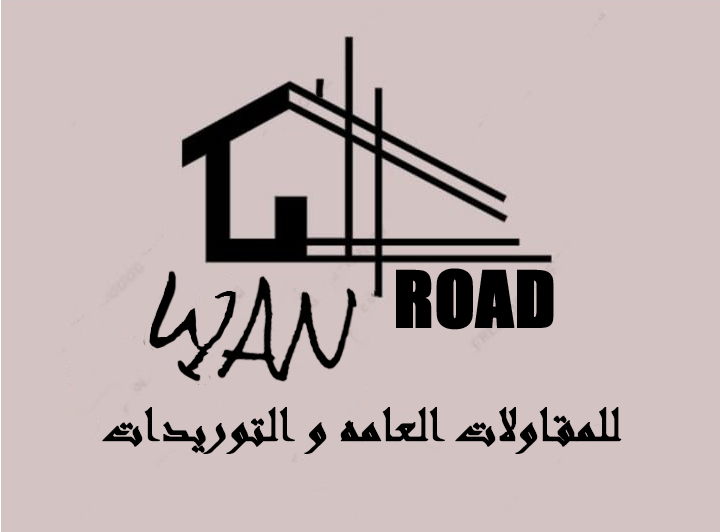
<style>
.page{position:relative;width:720px;height:532px;background:#d3c3c3}
.page>*{position:absolute;margin:0}
.t1{font:54.9px "Andalus";color:#000000;font-weight:bold}
</style>
<div class="page">
<p class="t1" style="left:102px;top:407px;width:520px;height:47px">للمقاولات العامه و التوريدات</p>
</div>
